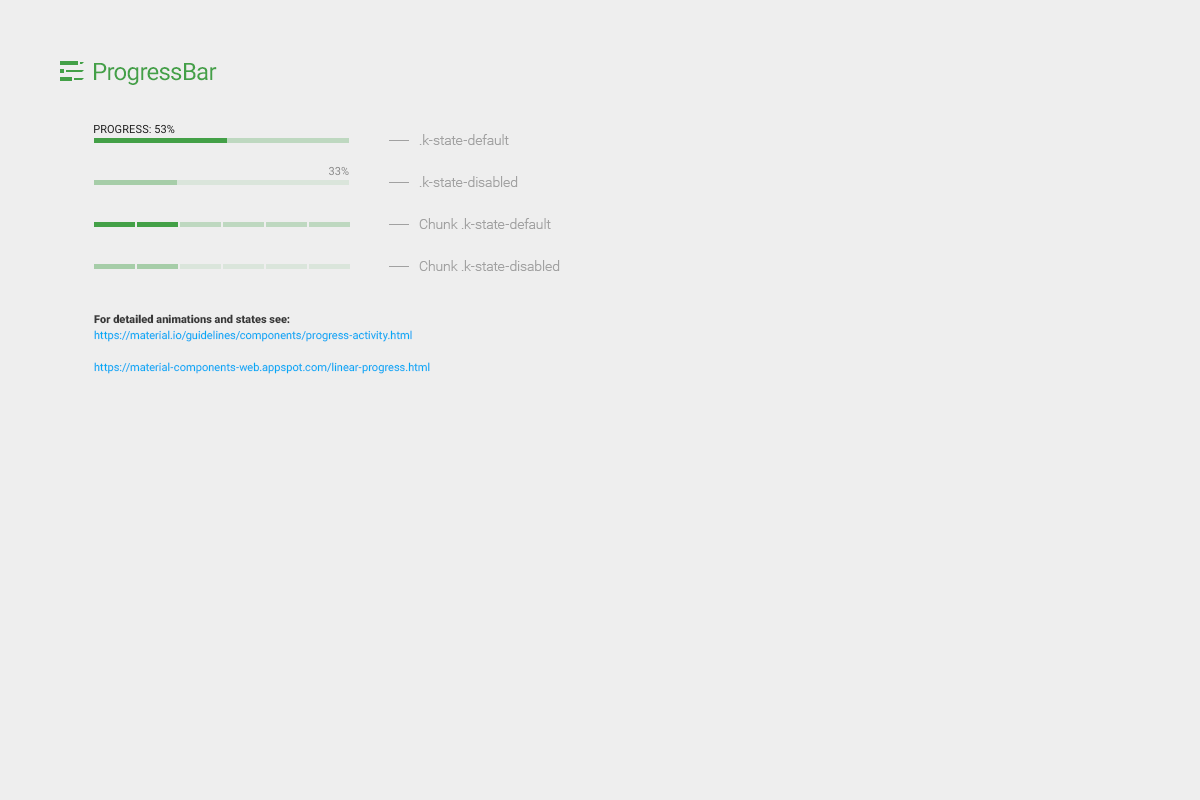
<style>
.page{position:relative;width:1200px;height:800px;background:#eeeeee}
.page>*{position:absolute;margin:0}
.t1{font:24px "Roboto-Regular";letter-spacing:-0.025em;color:#43a047}
.t2{font:11px "Roboto-Regular";color:#1f1f1f;text-transform:uppercase}
.t3{font:14px/42px "Roboto-Light";color:#a1a1a1}
.t4{font:11px "Roboto-Regular";text-transform:uppercase}
.t5{font:11px/16px "Roboto-Regular";color:#03a9f4}
.t6{font:11px/16px "Roboto-Black";color:#383838}
</style>
<div class="page">
<p class="t1" style="left:94px;top:63px;width:123px;height:22px">ProgressBar</p>
<p class="t2" style="left:94px;top:124px;width:81px;height:10px">Progress: 53%</p>
<p class="t3" style="left:419px;top:134px;width:141px;height:137px">.k-state-default<br>.k-state-disabled<br>Chunk .k-state-default<br>Chunk .k-state-disabled</p>
<p class="t4" style="left:329px;top:166px;width:20px;height:10px">33%</p>
<p class="t5" style="left:94px;top:314px;width:336px;height:60px"><span class="t6">For detailed animations and states see: <br></span>https://material.io/guidelines/components/progress-activity.html<br><br>https://material-components-web.appspot.com/linear-progress.html</p>
</div>
